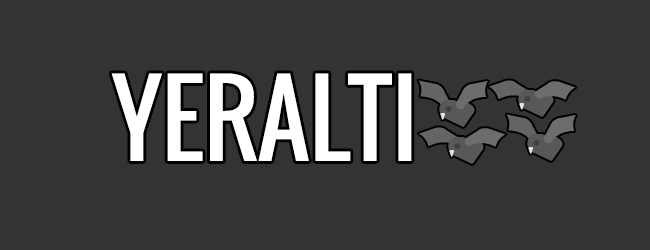
<style>
.page{position:relative;width:650px;height:250px;background:#333333}
.page>*{position:absolute;margin:0}
.t1{font:100px "Oswald-Regular";color:#ffffff}
</style>
<div class="page">
<p class="t1" style="left:111px;top:73px;width:301px;height:88px">YERALTI</p>
</div>
